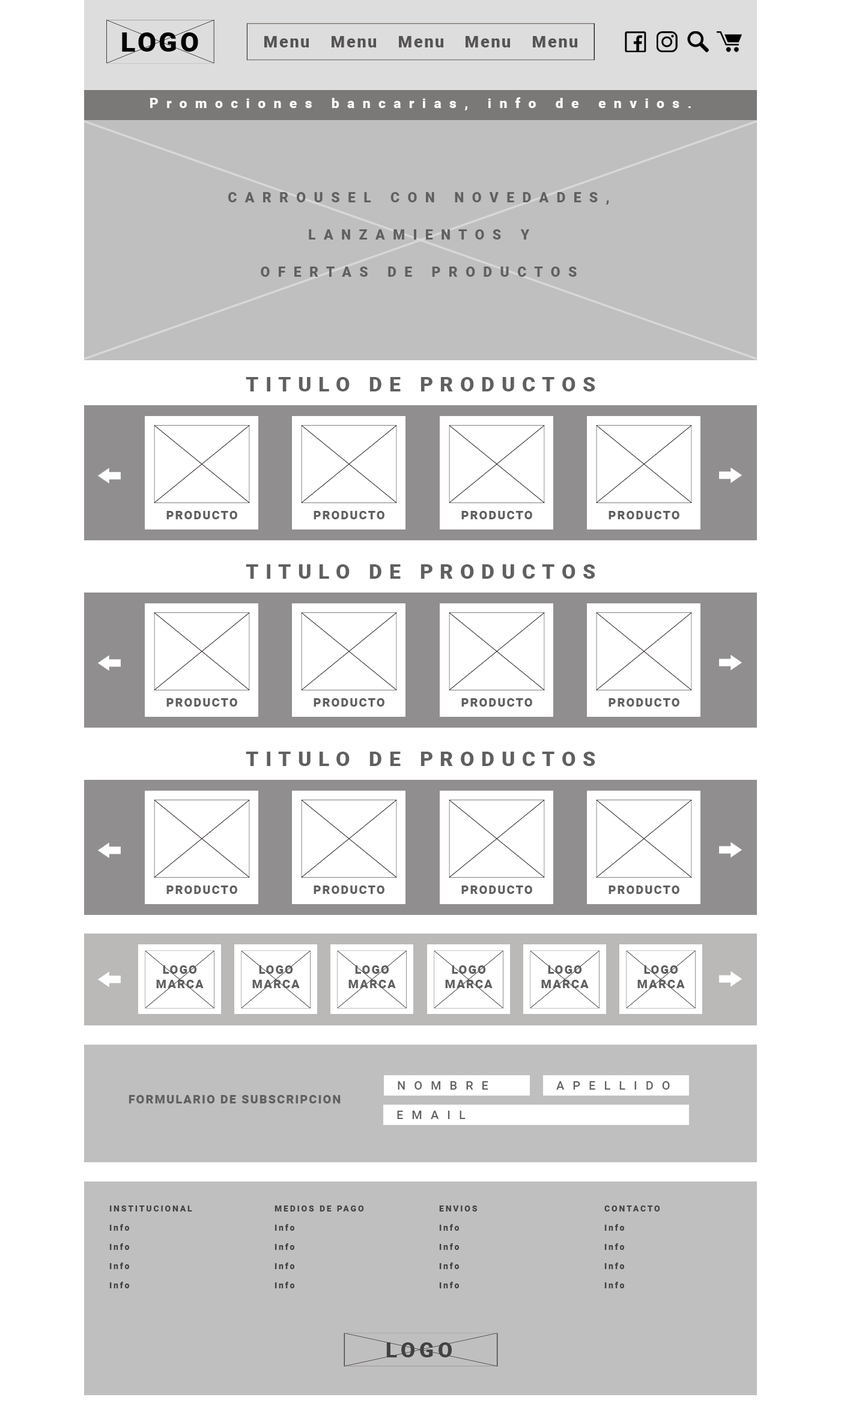
<style>
.page{position:relative;width:841px;height:1418px;background:#ffffff}
.page>*{position:absolute;margin:0}
.t1{font:13.8px "Roboto-Black";letter-spacing:0.58em;color:#fcf9f9}
.t2{font:13.8px/37.2px "Roboto-Black";letter-spacing:0.58em;color:#606060}
.t3{font:20.4px "Roboto-Black";letter-spacing:0.34em;color:#606060}
.t4{font:12px "Roboto-Black";letter-spacing:0.1em;color:#606060}
.t5{font:12px "Roboto-Medium";letter-spacing:0.7em;color:#606060}
.t6{font:8.4px/19.2px "Roboto-Black";letter-spacing:0.2em;color:#434242}
</style>
<div class="page">
<p class="t1" style="left:150px;top:97px;width:541px;height:13px">Promociones bancarias, info de envios.</p>
<p class="t2" style="left:228px;top:192px;width:381px;height:85px;text-align:center">CARROUSEL CON NOVEDADES, <br>LANZAMIENTOS Y <br>OFERTAS DE PRODUCTOS</p>
<p class="t3" style="left:246px;top:377px;width:349px;height:15px">TITULO DE PRODUCTOS</p>
<p class="t4" style="left:166px;top:511px;width:71px;height:8px">PRODUCTO</p>
<p class="t4" style="left:313px;top:511px;width:71px;height:8px">PRODUCTO</p>
<p class="t4" style="left:461px;top:511px;width:71px;height:8px">PRODUCTO</p>
<p class="t4" style="left:608px;top:511px;width:71px;height:8px">PRODUCTO</p>
<p class="t3" style="left:246px;top:564px;width:349px;height:15px">TITULO DE PRODUCTOS</p>
<p class="t4" style="left:166px;top:698px;width:71px;height:9px">PRODUCTO</p>
<p class="t4" style="left:313px;top:698px;width:71px;height:9px">PRODUCTO</p>
<p class="t4" style="left:461px;top:698px;width:71px;height:9px">PRODUCTO</p>
<p class="t4" style="left:608px;top:698px;width:71px;height:9px">PRODUCTO</p>
<p class="t3" style="left:246px;top:752px;width:349px;height:14px">TITULO DE PRODUCTOS</p>
<p class="t4" style="left:166px;top:886px;width:71px;height:8px">PRODUCTO</p>
<p class="t4" style="left:313px;top:886px;width:71px;height:8px">PRODUCTO</p>
<p class="t4" style="left:461px;top:886px;width:71px;height:8px">PRODUCTO</p>
<p class="t4" style="left:608px;top:886px;width:71px;height:8px">PRODUCTO</p>
<p class="t4" style="left:156px;top:966px;width:48px;height:22px;text-align:center">LOGO <br>MARCA</p>
<p class="t4" style="left:252px;top:966px;width:48px;height:22px;text-align:center">LOGO <br>MARCA</p>
<p class="t4" style="left:348px;top:966px;width:48px;height:22px;text-align:center">LOGO <br>MARCA</p>
<p class="t4" style="left:445px;top:966px;width:47px;height:22px;text-align:center">LOGO <br>MARCA</p>
<p class="t4" style="left:541px;top:966px;width:47px;height:22px;text-align:center">LOGO <br>MARCA</p>
<p class="t4" style="left:637px;top:966px;width:48px;height:22px;text-align:center">LOGO <br>MARCA</p>
<p class="t5" style="left:398px;top:1082px;width:90px;height:8px">NOMBRE</p>
<p class="t5" style="left:556px;top:1082px;width:114px;height:8px">APELLIDO</p>
<p class="t4" style="left:129px;top:1095px;width:211px;height:9px">FORMULARIO DE SUBSCRIPCION</p>
<p class="t5" style="left:397px;top:1111px;width:68px;height:8px">EMAIL</p>
<p class="t6" style="left:109px;top:1206px;width:83px;height:83px">INSTITUCIONAL<br>Info<br>Info<br>Info<br>Info</p>
<p class="t6" style="left:274px;top:1206px;width:90px;height:83px">MEDIOS DE PAGO<br>Info<br>Info<br>Info<br>Info</p>
<p class="t6" style="left:439px;top:1206px;width:38px;height:83px">ENVIOS<br>Info<br>Info<br>Info<br>Info</p>
<p class="t6" style="left:604px;top:1206px;width:56px;height:83px">CONTACTO<br>Info<br>Info<br>Info<br>Info</p>
</div>
